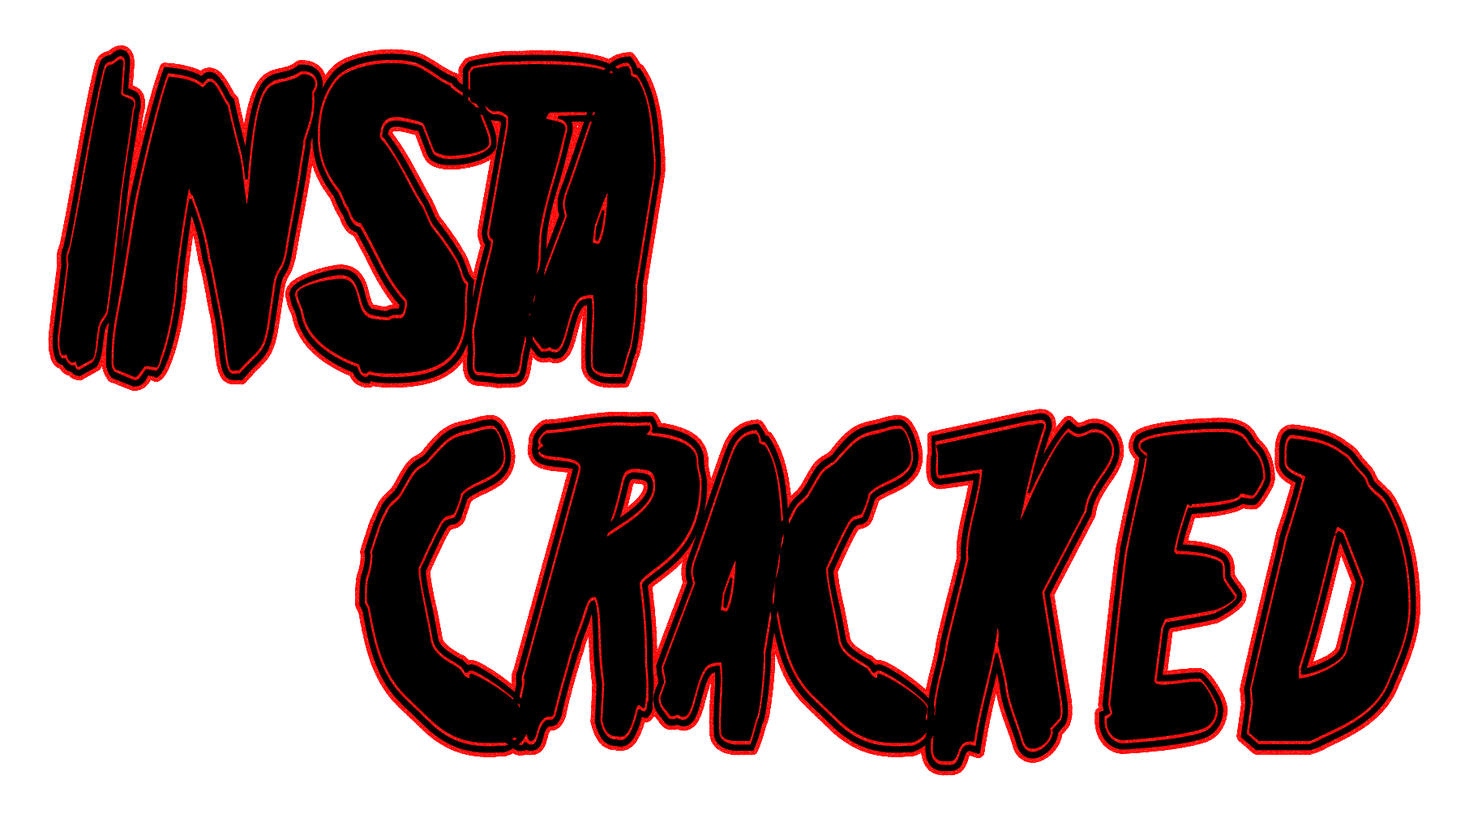
<style>
.page{position:relative;width:1465px;height:814px;background:#ffffff}
.page>*{position:absolute;margin:0}
.t1{font:405.4px "Friday13BonusNFI";letter-spacing:-0.04em;color:#000000;text-transform:uppercase;font-weight:bold;scale:0.8 1}
</style>
<div class="page">
<p class="t1" style="left:53px;top:49px;width:609px;height:338px">insta</p>
<p class="t1" style="left:359px;top:413px;width:1057px;height:358px">CRACKed</p>
</div>
